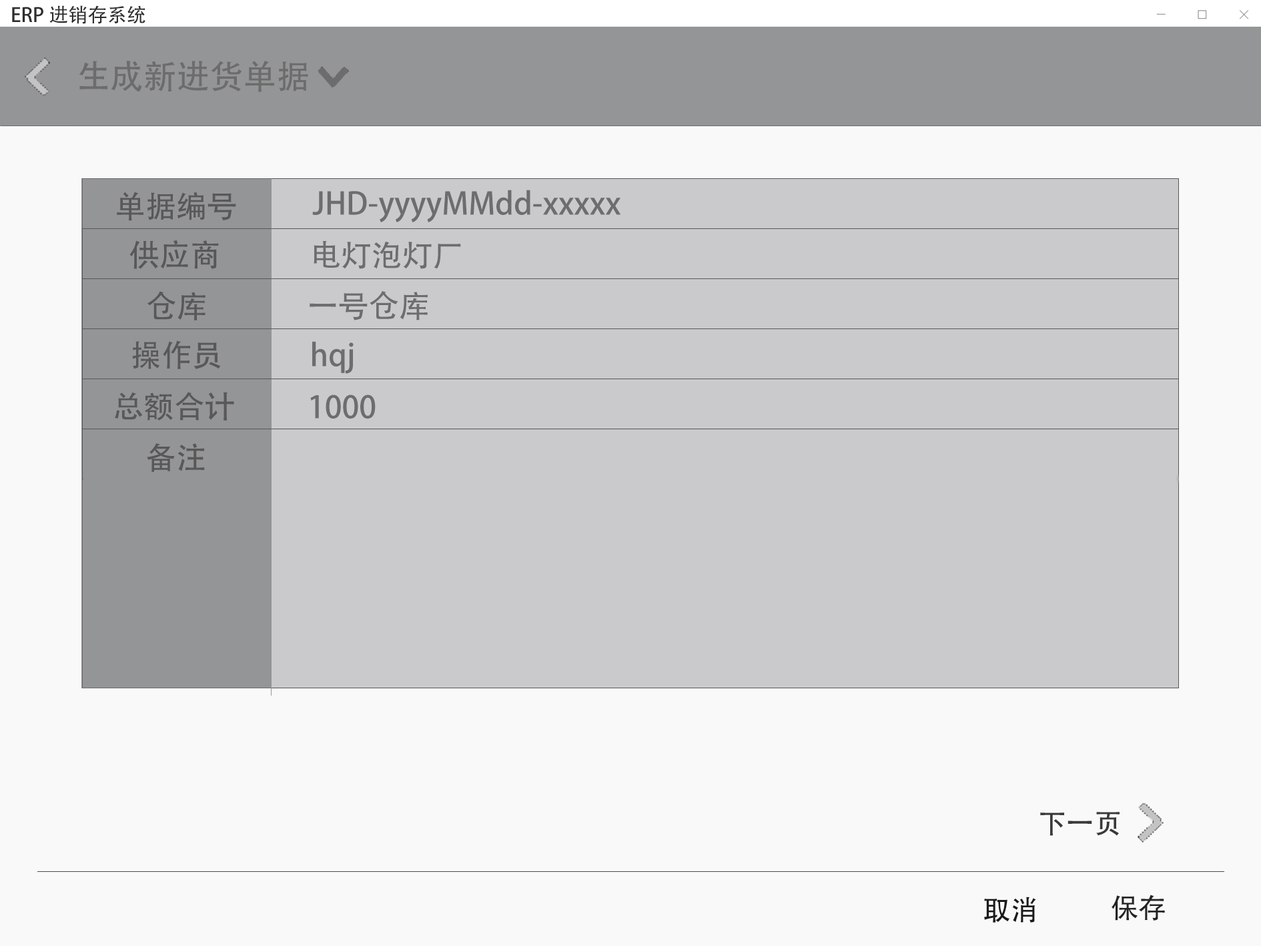
<style>
.page{position:relative;width:1261px;height:946px;background:#f9f9f9}
.page>*{position:absolute;margin:0}
.t1{font:19.5px "AdobeHeitiStd-Regular";color:#2e2e2e}
.t2{font:33.4px "AdobeHeitiStd-Regular";color:#6c6c6c}
.t3{font:30.6px "AdobeHeitiStd-Regular";color:#585859}
.t4{font:30.6px "AdobeHeitiStd-Regular";color:#6c6d6d}
.t5{font:27.8px "AdobeHeitiStd-Regular";color:#3a3839}
.t6{font:27.8px "AdobeHeitiStd-Regular";color:#1b1a1a}
.t7{font:27.8px "AdobeHeitiStd-Regular";color:#242323}
</style>
<div class="page">
<p class="t1" style="left:12px;top:5px;width:133px;height:19px">ERP进销存系统</p>
<p class="t2" style="left:79px;top:61px;width:229px;height:31px">生成新进货单据</p>
<p class="t3" style="left:117px;top:192px;width:119px;height:29px">单据编号</p>
<p class="t4" style="left:312px;top:190px;width:309px;height:32px">JHD-yyyyMMdd-xxxxx</p>
<p class="t3" style="left:129px;top:240px;width:90px;height:29px">供应商</p>
<p class="t4" style="left:314px;top:240px;width:147px;height:29px">电灯泡灯厂</p>
<p class="t3" style="left:147px;top:291px;width:59px;height:29px">仓库</p>
<p class="t4" style="left:310px;top:291px;width:118px;height:29px">一号仓库</p>
<p class="t3" style="left:132px;top:340px;width:89px;height:29px">操作员</p>
<p class="t4" style="left:312px;top:341px;width:42px;height:33px">hqj</p>
<p class="t3" style="left:115px;top:392px;width:119px;height:28px">总额合计</p>
<p class="t4" style="left:310px;top:394px;width:66px;height:24px">1000</p>
<p class="t3" style="left:147px;top:443px;width:58px;height:29px">备注</p>
<p class="t5" style="left:1040px;top:811px;width:80px;height:24px">下一页</p>
<p class="t6" style="left:984px;top:896px;width:52px;height:26px">取消</p>
<p class="t7" style="left:1112px;top:894px;width:53px;height:26px">保存</p>
</div>
